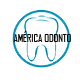
<style>
.page{position:relative;width:80px;height:80px;background:#ffffff}
.page>*{position:absolute;margin:0}
.t1{font:10.6px "AgencyFB-Reg";color:#000000}
</style>
<div class="page">
<p class="t1" style="left:13px;top:31px;width:58px;height:11px">AMÉRICA ODONTO</p>
</div>
